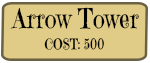
<style>
.page{position:relative;width:150px;height:63px;background:#e0cc87}
.page>*{position:absolute;margin:0}
.t1{font:27.4px "EmilysCandy-Regular";color:#000000;scale:0.83 1}
.t2{font:14.5px "EmilysCandy-Regular";color:#000000;scale:0.83 1}
</style>
<div class="page">
<p class="t1" style="left:10px;top:7px;width:129px;height:22px">Arrow Tower</p>
<p class="t2" style="left:44px;top:37px;width:60px;height:13px">COST: 500</p>
</div>
